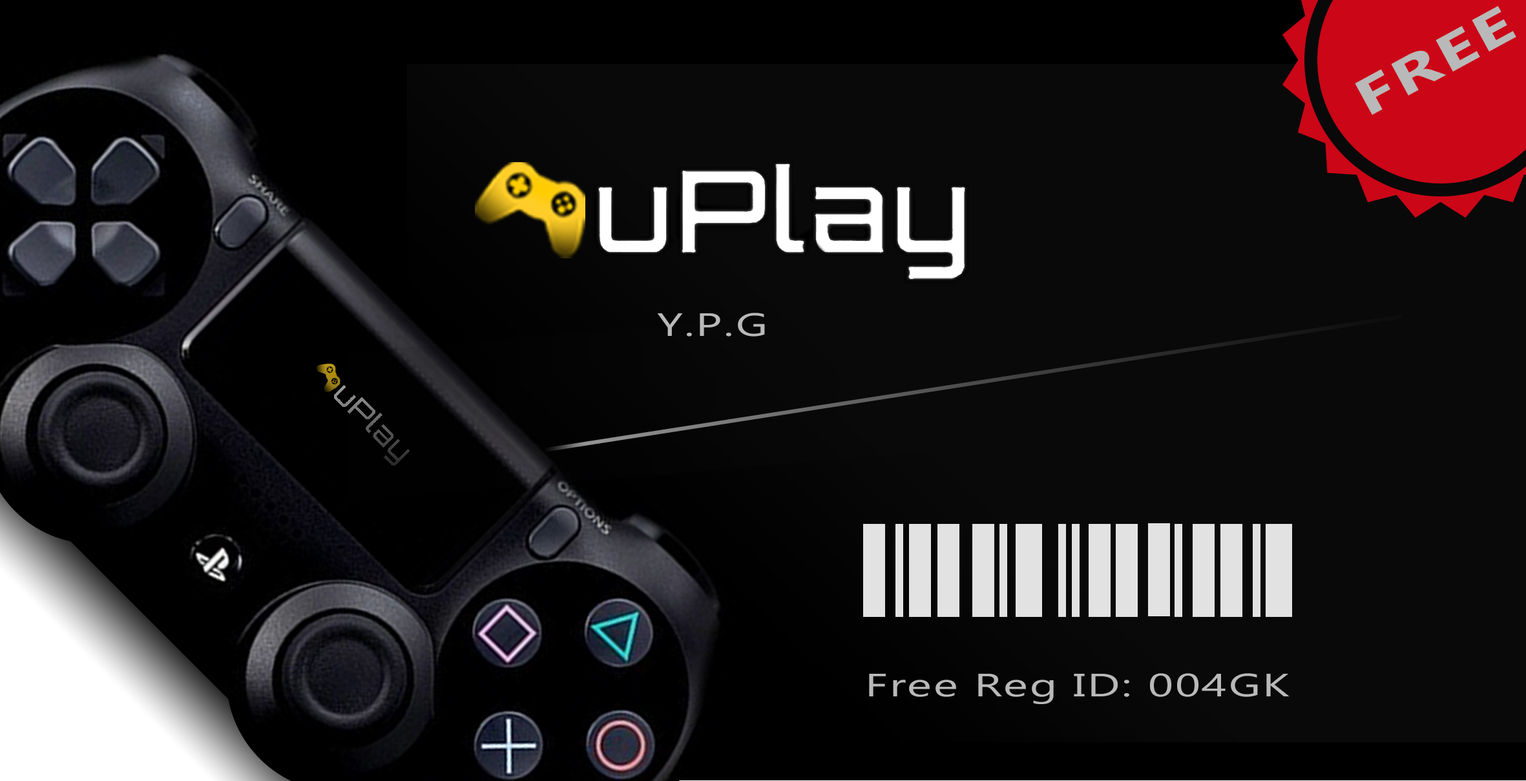
<style>
.page{position:relative;width:1526px;height:781px;background:#090909}
.page>*{position:absolute;margin:0}
.t1{font:51px "Gadugi-Bold";letter-spacing:0.04em;color:#b9b9b9;scale:1.43 1}
.t2{font:32.3px "Gadugi";letter-spacing:0.04em;color:#b9b9b9;scale:1.43 1}
</style>
<div class="page">
<p class="t1" style="left:1355px;top:6px;width:162px;height:109px;rotate:-29deg">FREE</p>
<p class="t2" style="left:657px;top:313px;width:108px;height:24px">Y.P.G</p>
<p class="t2" style="left:869px;top:673px;width:421px;height:31px">Free Reg ID: 004GK</p>
</div>
